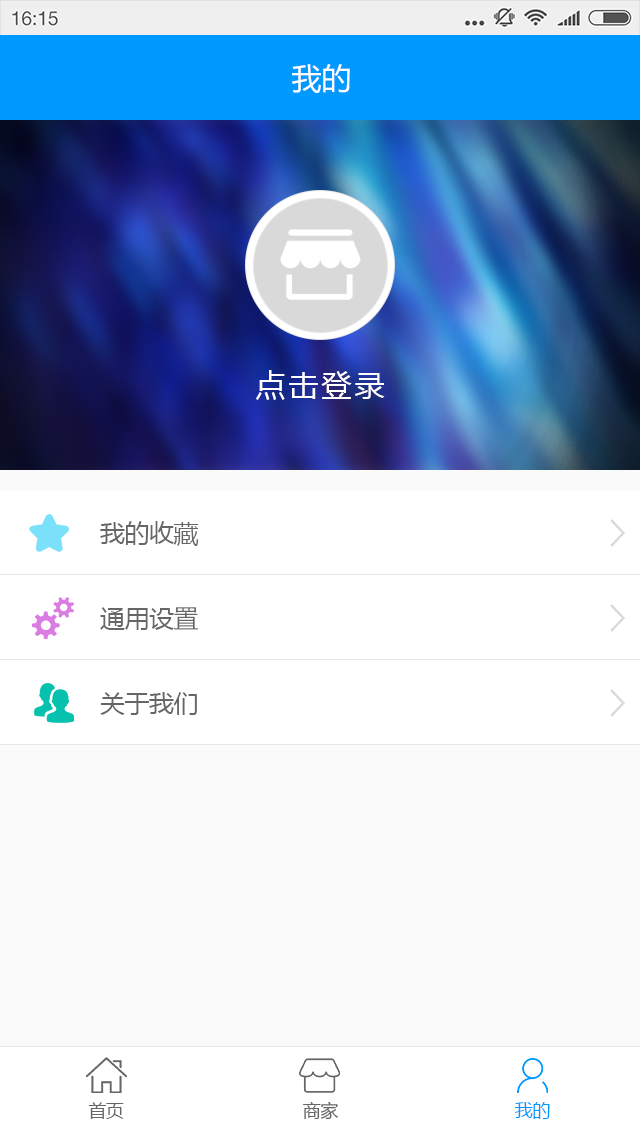
<style>
.page{position:relative;width:640px;height:1136px;background:#fafafa}
.page>*{position:absolute;margin:0}
.t1{font:30px "MicrosoftYaHei";color:#fefefe}
.t2{font:30px "MicrosoftYaHei";letter-spacing:0.1em;color:#ffffff}
.t3{font:25px "MicrosoftYaHei";letter-spacing:-0.02em;color:#666666}
.t4{font:18px "MicrosoftYaHei";letter-spacing:-0.02em;color:#666666}
.t5{font:18px "MicrosoftYaHei";letter-spacing:-0.02em;color:#0099ff}
</style>
<div class="page">
<p class="t1" style="left:292px;top:64px;width:58px;height:29px">我的</p>
<p class="t2" style="left:256px;top:370px;width:129px;height:30px">点击登录</p>
<p class="t3" style="left:100px;top:521px;width:99px;height:25px">我的收藏</p>
<p class="t3" style="left:100px;top:607px;width:98px;height:23px">通用设置</p>
<p class="t3" style="left:100px;top:692px;width:97px;height:23px">关于我们</p>
<p class="t4" style="left:88px;top:1102px;width:36px;height:17px">首页</p>
<p class="t4" style="left:303px;top:1101px;width:36px;height:19px">商家</p>
<p class="t5" style="left:514px;top:1102px;width:36px;height:17px">我的</p>
</div>
